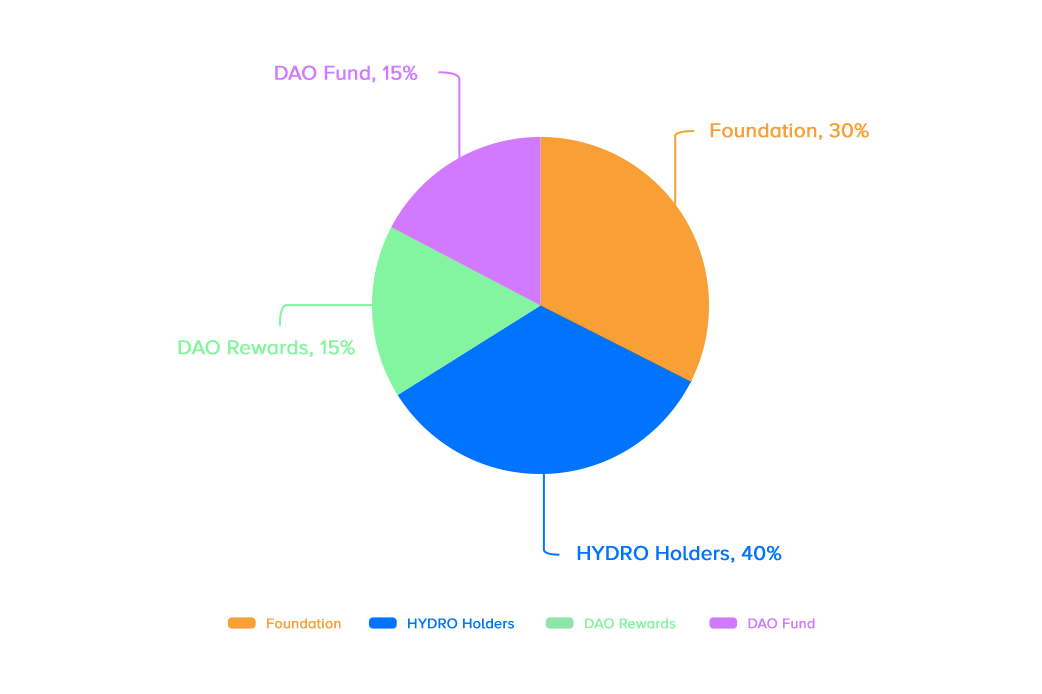
<style>
.page{position:relative;width:1042px;height:694px;background:#ffffff}
.page>*{position:absolute;margin:0}
.t1{font:20.5px "ProximaNovaA-Regular";color:#d17aff;font-weight:bold}
.t2{font:20.5px "ProximaNovaA-Regular";color:#f89f35;font-weight:bold}
.t3{font:20.5px "ProximaNovaA-Regular";color:#87f49f;font-weight:bold}
.t4{font:20.5px "ProximaNovaA-Regular";color:#0074ff;font-weight:bold}
.t5{font:14.3px "ProximaNovaA-Regular";color:#f89f35;font-weight:bold}
.t6{font:14.3px "ProximaNovaA-Regular";color:#0074ff;font-weight:bold}
.t7{font:14.3px "ProximaNovaA-Regular";color:#83f49f;font-weight:bold}
.t8{font:14.3px "ProximaNovaA-Regular";color:#d17aff;font-weight:bold}
</style>
<div class="page">
<p class="t1" style="left:275px;top:65px;width:143px;height:18px">DAO Fund, 15%</p>
<p class="t2" style="left:710px;top:123px;width:159px;height:17px">Foundation, 30%</p>
<p class="t3" style="left:178px;top:340px;width:177px;height:17px">DAO Rewards, 15%</p>
<p class="t4" style="left:577px;top:545px;width:205px;height:18px">HYDRO Holders, 40%</p>
<p class="t5" style="left:267px;top:618px;width:74px;height:11px">Foundation</p>
<p class="t6" style="left:408px;top:618px;width:106px;height:11px">HYDRO Holders</p>
<p class="t7" style="left:585px;top:618px;width:91px;height:11px">DAO Rewards</p>
<p class="t8" style="left:748px;top:618px;width:67px;height:11px">DAO Fund</p>
</div>
